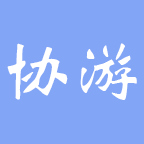
<style>
.page{position:relative;width:144px;height:144px;background:#82a6f5}
.page>*{position:absolute;margin:0}
.t1{font:72px "STXinwei";color:#ffffff}
</style>
<div class="page">
<p class="t1" style="left:7px;top:43px;width:130px;height:57px">协游</p>
</div>
